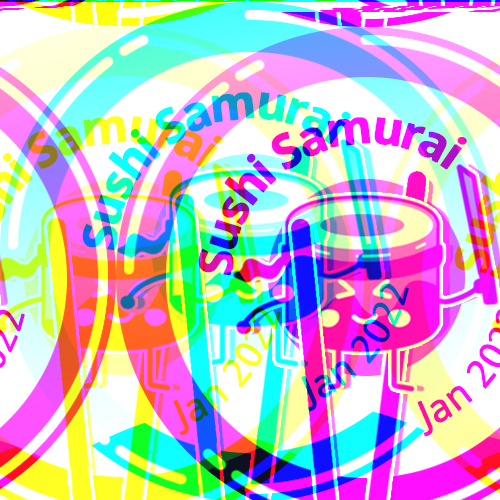
<style>
.page{position:relative;width:500px;height:500px}
.page>*{position:absolute;margin:0}
.t1{font:46.9px "NotoSans-Bold";letter-spacing:-0.075em;font-weight:bold}
.t2{font:37.5px "NotoSans";letter-spacing:0.025em;font-weight:bold}
</style>
<div class="page">
<p class="t1" style="left:82px;top:90px;width:269px;height:159px;text-align:center">Sushi Samurai</p>
<p class="t2" style="left:301px;top:281px;width:108px;height:129px;text-align:center">Jan 2022</p>
</div>
